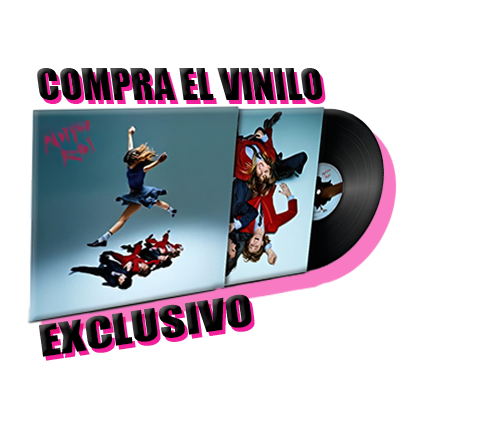
<style>
.page{position:relative;width:483px;height:428px;background:#ffffff}
.page>*{position:absolute;margin:0}
.t1{font:40.5px "Impact";color:#000000}
.t2{font:40px "Impact";color:#000000;scale:1.27 1}
</style>
<div class="page">
<p class="t1" style="left:37px;top:68px;width:286px;height:32px">COMPRA EL VINILO</p>
<p class="t2" style="left:39px;top:294px;width:213px;height:63px;rotate:-8deg">EXCLUSIVO</p>
</div>
